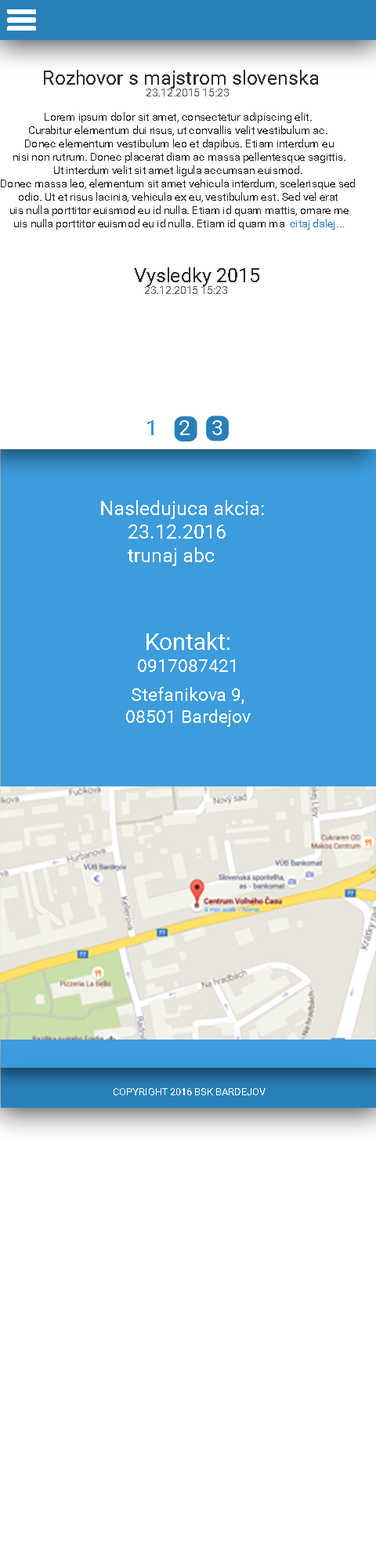
<style>
.page{position:relative;width:376px;height:1568px;background:#ffffff}
.page>*{position:absolute;margin:0}
.t1{font:19.6px "Roboto-Regular";color:#2d2d2d}
.t2{font:11.1px "Roboto-Regular";color:#5e5e5e}
.t3{font:11.1px "Roboto-Regular";color:#212121}
.t4{font:11.1px "Roboto-Regular";color:#2980b9}
.t5{font:19.6px "Roboto-Regular";color:#ffffff}
.t6{font:18px "Roboto-Regular";color:#ffffff}
.t7{font:23.5px "Roboto-Regular";color:#ffffff}
.t8{font:10.2px "Roboto-Regular";color:#ffffff}
</style>
<div class="page">
<p class="t1" style="left:44px;top:70px;width:274px;height:19px">Rozhovor s majstrom slovenska</p>
<p class="t2" style="left:147px;top:89px;width:82px;height:7px">23.12.2015 15:23</p>
<p class="t3" style="left:1px;top:112px;width:354px;height:118px;text-align:center">Lorem ipsum dolor sit amet, consectetur adipiscing elit. <br>Curabitur elementum dui risus, ut convallis velit vestibulum ac. <br>Donec elementum vestibulum leo et dapibus. Etiam interdum eu<br> nisi non rutrum. Donec placerat diam ac massa pellentesque sagittis. <br>Ut interdum velit sit amet ligula accumsan euismod. <br>Donec massa leo, elementum sit amet vehicula interdum, scelerisque sed <br>odio. Ut et risus lacinia, vehicula ex eu, vestibulum est. Sed vel erat <br>uis nulla porttitor euismod eu id nulla. Etiam id quam mattis, ornare me<br>uis nulla porttitor euismod eu id nulla. Etiam id quam ma  <span class="t4">citaj dalej...</span></p>
<p class="t1" style="left:134px;top:267px;width:126px;height:19px">Vysledky 2015</p>
<p class="t2" style="left:145px;top:286px;width:82px;height:8px">23.12.2015 15:23</p>
<p class="t5" style="left:101px;top:500px;width:163px;height:66px">Nasledujuca akcia:<br> 23.12.2016<br> trunaj abc</p>
<p class="t6" style="left:126px;top:632px;width:125px;height:95px;text-align:center"><span class="t7">Kontakt:<br> <br></span>0917087421<br> <br>Stefanikova 9,<br>08501 Bardejov</p>
<p class="t8" style="left:114px;top:1088px;width:152px;height:7px">COPYRIGHT 2016 BSK BARDEJOV</p>
</div>
